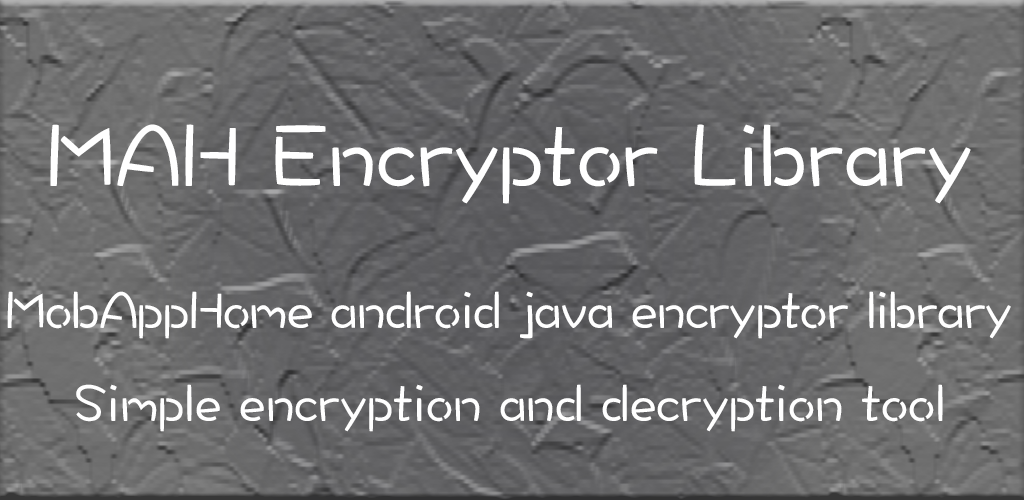
<style>
.page{position:relative;width:1024px;height:500px}
.page>*{position:absolute;margin:0}
.t1{font:91.7px "DFWaWaTC-W5";color:#ffffff}
.t2{font:54.2px "DFWaWaTC-W5";letter-spacing:-0.01em;color:#ffffff}
.t3{font:54.2px "DFWaWaTC-W5";color:#ffffff}
</style>
<div class="page">
<p class="t1" style="left:50px;top:124px;width:921px;height:80px">MAH Encryptor Library</p>
<p class="t2" style="left:7px;top:291px;width:1004px;height:48px">MobAppHome android java encryptor library</p>
<p class="t3" style="left:76px;top:384px;width:867px;height:48px">Simple encryption and decryption tool</p>
</div>
